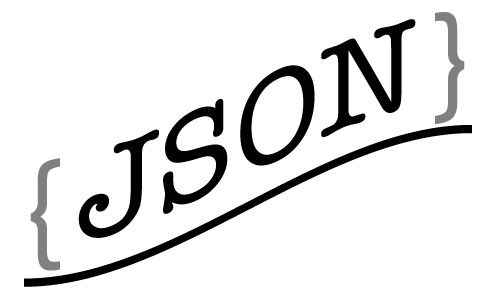
<style>
.page{position:relative;width:500px;height:300px;background:#ffffff}
.page>*{position:absolute;margin:0}
.t1{font:128px "AmericanTypewriter";color:#000000}
.t2{font:128px "AmericanTypewriter";color:#808080}
</style>
<div class="page">
<p class="t1" style="left:30px;top:12px;width:435px;height:259px;text-align:center"><span class="t2">{</span>JSON<span class="t2">}</span></p>
<p class="t1" style="left:24px;top:125px;width:448px;height:162px">_______</p>
</div>
